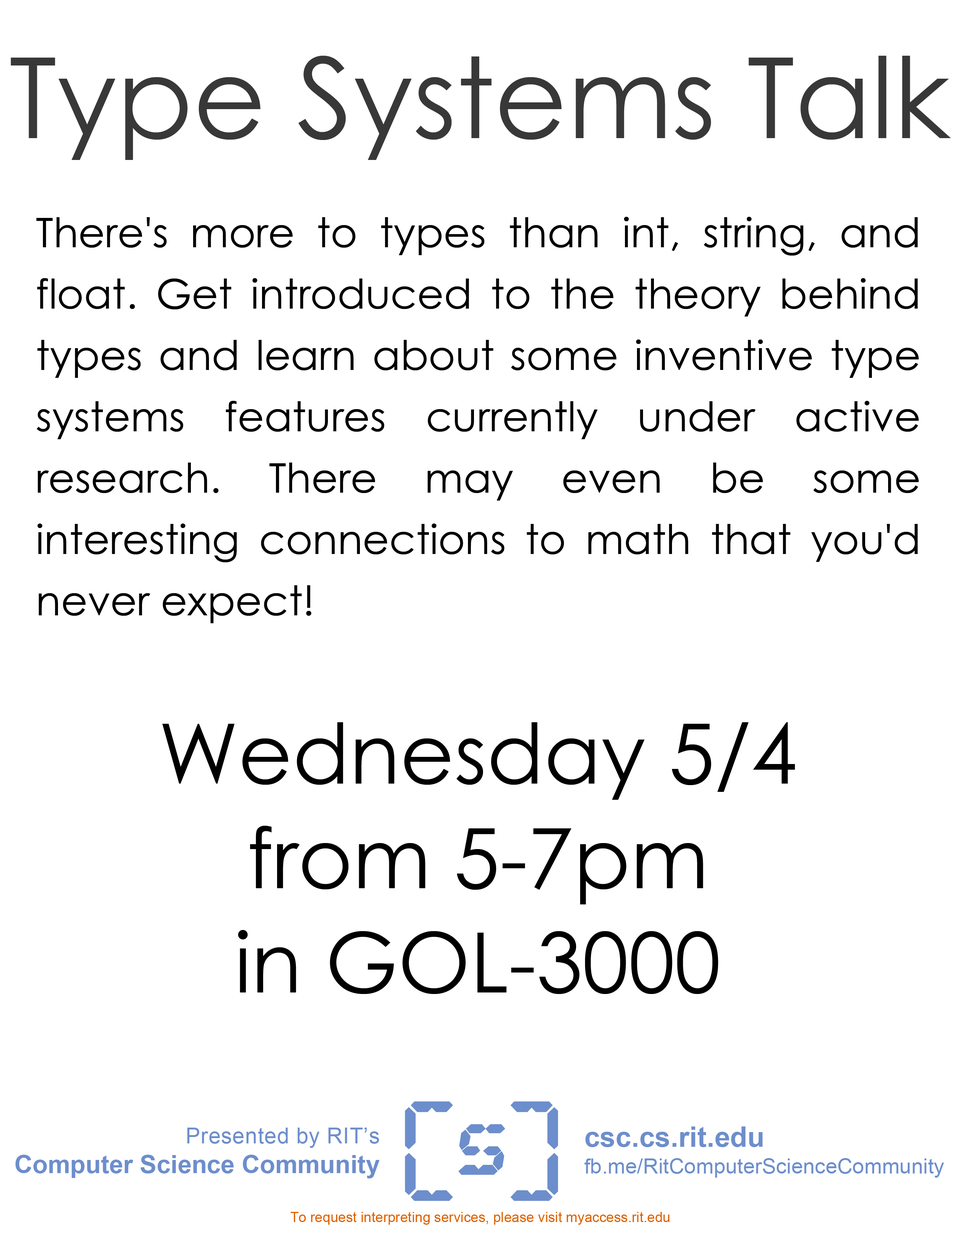
<style>
.page{position:relative;width:960px;height:1242px;background:#ffffff}
.page>*{position:absolute;margin:0}
.t1{font:112.1px "CenturyGothic";color:#383838}
.t2{font:41.1px/61.4px "CenturyGothic";color:#000000}
.t3{font:83.3px/104.3px "CenturyGothic";color:#000000}
.t4{font:25.1px/29.8px "Arial-BoldMT";color:#6d8ecc}
.t5{font:22px/29.8px "ArialMT";letter-spacing:0.02em;color:#6d8ecc}
.t6{font:21.2px/26.7px "ArialMT";color:#6d8ecc}
.t7{font:28.2px/26.7px "Arial-BoldMT";color:#6d8ecc}
.t8{font:13.9px "ArialMT";color:#de6100}
</style>
<div class="page">
<p class="t1" style="left:11px;top:56px;width:940px;height:104px">Type Systems Talk</p>
<p class="t2" style="left:36px;top:217px;width:883px;height:406px;text-align:justify">There's more to types than int, string, and float. Get introduced to the theory behind types and learn about some inventive type systems features currently under active research. There may even be some interesting connections to math that you'd never expect!</p>
<p class="t3" style="left:162px;top:722px;width:633px;height:272px;text-align:center">Wednesday 5/4<br>from 5-7pm<br>in GOL-3000</p>
<p class="t4" style="left:15px;top:1128px;width:365px;height:51px;text-align:right"><span class="t5">Presented by RIT’s<br></span>Computer Science Community</p>
<p class="t6" style="left:584px;top:1127px;width:360px;height:51px"><span class="t7">csc.cs.rit.edu<br></span>fb.me/RitComputerScienceCommunity</p>
<p class="t8" style="left:290px;top:1212px;width:379px;height:13px">To request interpreting services, please visit myaccess.rit.edu</p>
</div>
